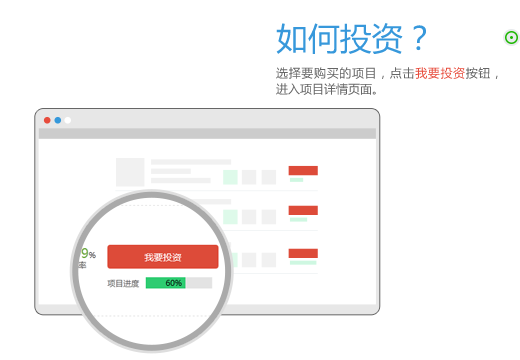
<style>
.page{position:relative;width:520px;height:360px;background:#ffffff}
.page>*{position:absolute;margin:0}
.t1{font:31.8px "MicrosoftYaHei";color:#3798db}
.t2{font:12px/15.9px "MicrosoftYaHei";color:#666666}
.t3{font:12px/15.9px "MicrosoftYaHei";color:#e74c3c}
</style>
<div class="page">
<p class="t1" style="left:276px;top:23px;width:150px;height:31px">如何投资？</p>
<p class="t2" style="left:276px;top:67px;width:222px;height:28px;text-align:justify">选择要购买的项目，点击<span class="t3">我要投资</span>按钮，进入项目详情页面。</p>
</div>
